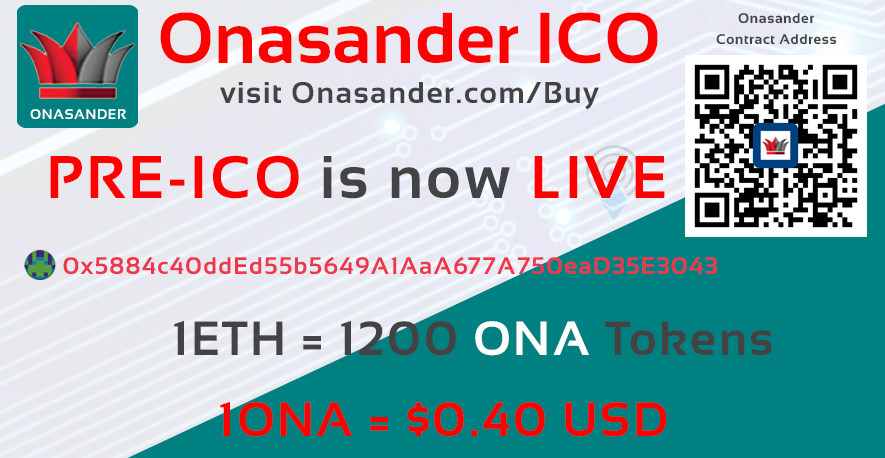
<style>
.page{position:relative;width:885px;height:458px;background:#008080}
.page>*{position:absolute;margin:0}
.t1{font:72px "Sansation-Bold";color:#ff0000}
.t2{font:14px "Sansation-Bold";letter-spacing:0.05em;color:#434244}
.t3{font:60px "Sansation-Bold";letter-spacing:0.05em;color:#ff0000}
.t4{font:60px "Sansation-Bold";letter-spacing:0.05em;color:#434244}
.t5{font:24px "Sansation-Bold";letter-spacing:0.05em;color:#ef364b}
.t6{font:48px "Sansation-Bold";letter-spacing:0.05em;color:#434244}
.t7{font:48px "Sansation-Bold";letter-spacing:0.05em;color:#ffffff}
.t8{font:48px "Sansation-Bold";letter-spacing:0.05em;color:#ff0000}
</style>
<div class="page">
<p class="t1" style="left:160px;top:12px;width:498px;height:52px">Onasander ICO</p>
<p class="t2" style="left:738px;top:13px;width:77px;height:11px">Onasander</p>
<p class="t2" style="left:716px;top:34px;width:121px;height:11px">Contract Address</p>
<p class="t3" style="left:50px;top:155px;width:615px;height:44px">PRE-ICO <span class="t4">is now</span> LIVE</p>
<p class="t5" style="left:63px;top:256px;width:654px;height:19px">0x5884c40ddEd55b5649A1AaA677A750eaD35E3043</p>
<p class="t6" style="left:174px;top:320px;width:598px;height:36px">1ETH = 1200 <span class="t7">ONA</span> Tokens</p>
<p class="t8" style="left:220px;top:401px;width:447px;height:36px">1ONA = $0.40 USD</p>
</div>
